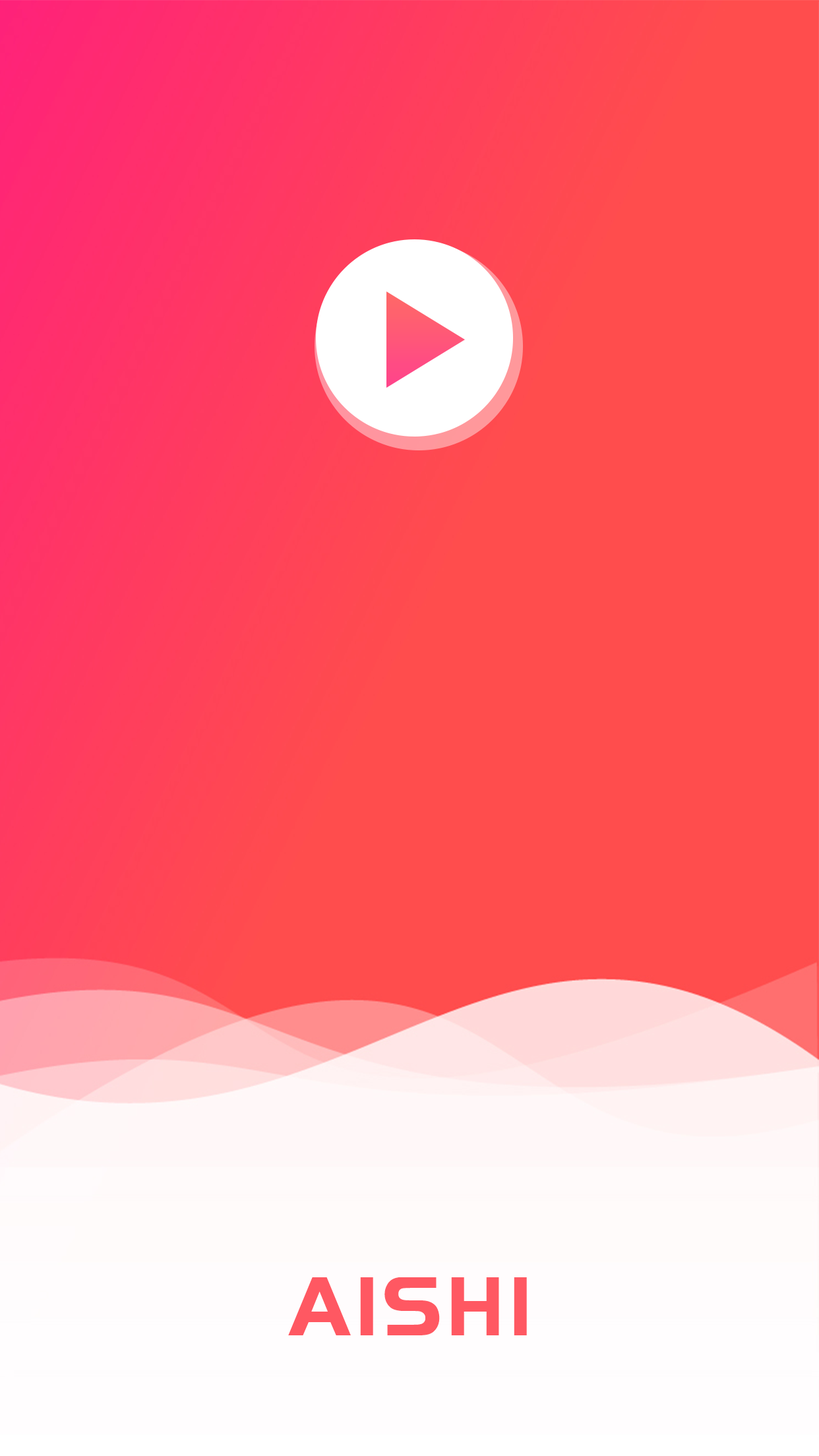
<style>
.page{position:relative;width:819px;height:1456px;background:#ff4d4d}
.page>*{position:absolute;margin:0}
.t1{font:87.1px "PangMenZhengDao";letter-spacing:0.04em;color:#ff5862}
</style>
<div class="page">
<p class="t1" style="left:288px;top:1277px;width:239px;height:58px">AISHI</p>
</div>
